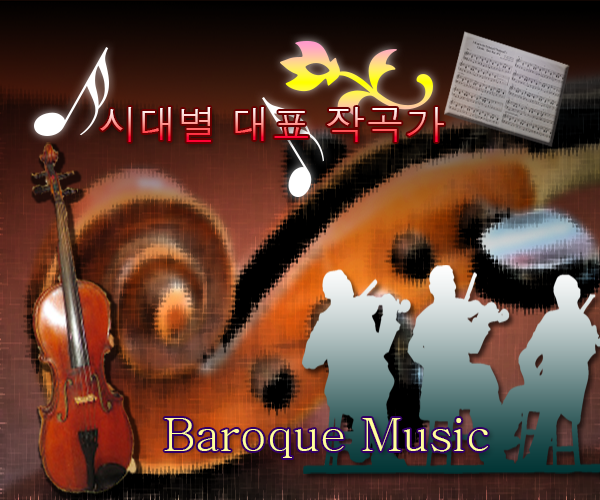
<style>
.page{position:relative;width:600px;height:500px}
.page>*{position:absolute;margin:0}
.t1{font:40px "Dotum"}
.t2{font:46px "Batang";color:#ffff99}
</style>
<div class="page">
<p class="t1" style="left:100px;top:107px;width:344px;height:35px">시대별 대표 작곡가</p>
<p class="t2" style="left:164px;top:418px;width:324px;height:40px">Baroque Music</p>
</div>
